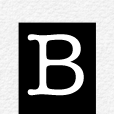
<style>
.page{position:relative;width:114px;height:114px;background:#000000}
.page>*{position:absolute;margin:0}
.t1{font:90px "AmericanTypewriter";color:#ffffff}
</style>
<div class="page">
<p class="t1" style="left:27px;top:34px;width:57px;height:62px">B</p>
</div>
